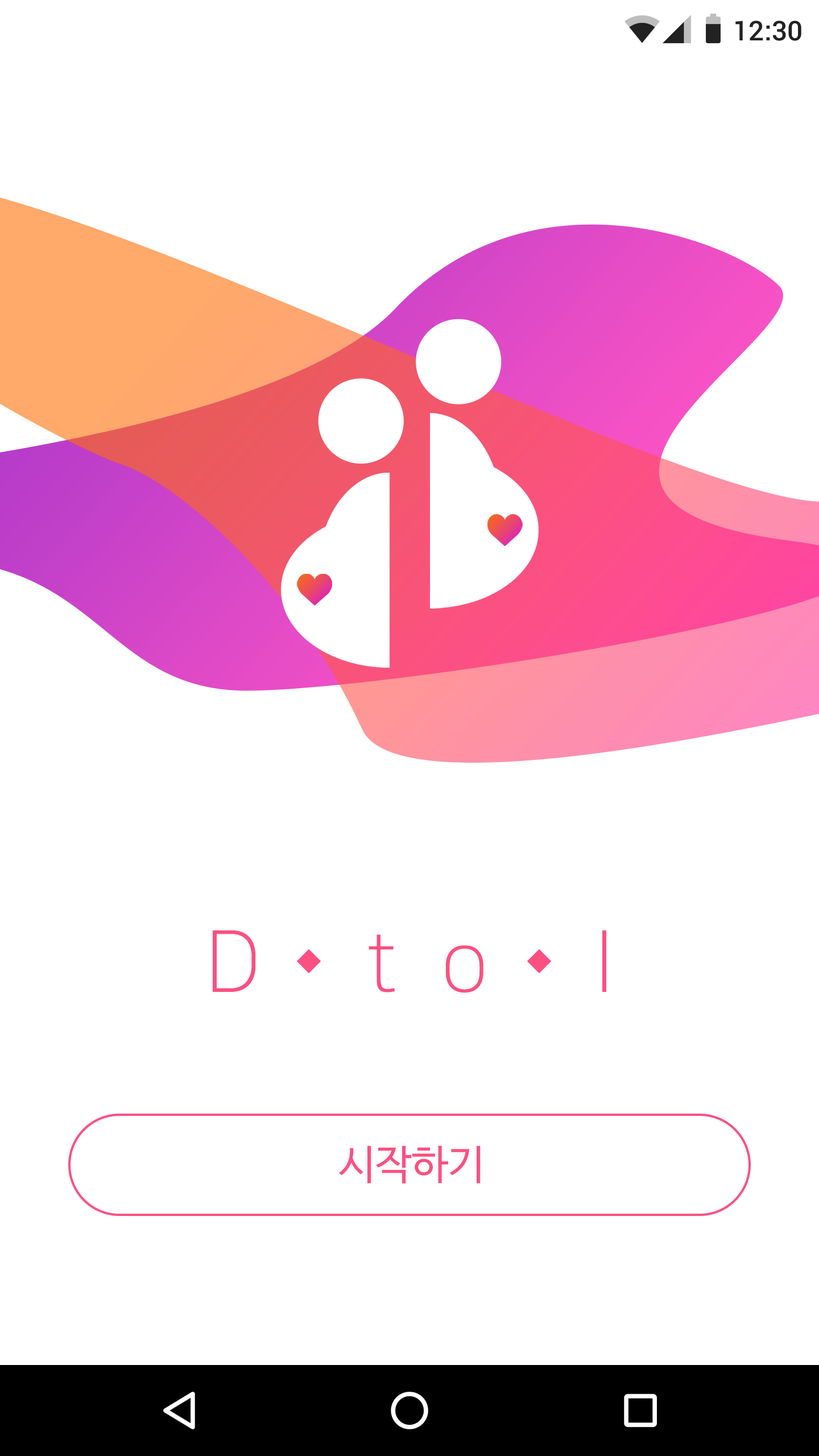
<style>
.page{position:relative;width:819px;height:1456px;background:#ffffff}
.page>*{position:absolute;margin:0}
.t1{font:27.3px "Roboto-Medium";color:#222222}
.t2{font:85.3px "NanumSquareL";letter-spacing:0.5em;color:#fb5082}
.t3{font:40.9px "NanumBarunGothic";color:#fb5082}
</style>
<div class="page">
<p class="t1" style="left:735px;top:20px;width:66px;height:21px">12:30</p>
<p class="t2" style="left:213px;top:930px;width:393px;height:63px">D to I</p>
<p class="t3" style="left:339px;top:1145px;width:142px;height:39px">시작하기</p>
</div>
